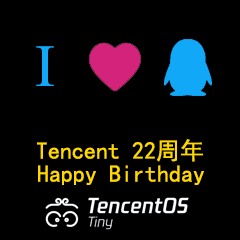
<style>
.page{position:relative;width:240px;height:240px;background:#000000}
.page>*{position:absolute;margin:0}
.t1{font:24px "SimHei";color:#ffd801}
</style>
<div class="page">
<p class="t1" style="left:37px;top:139px;width:166px;height:23px">Tencent 22周年</p>
<p class="t1" style="left:38px;top:165px;width:166px;height:20px">Happy Birthday</p>
</div>
